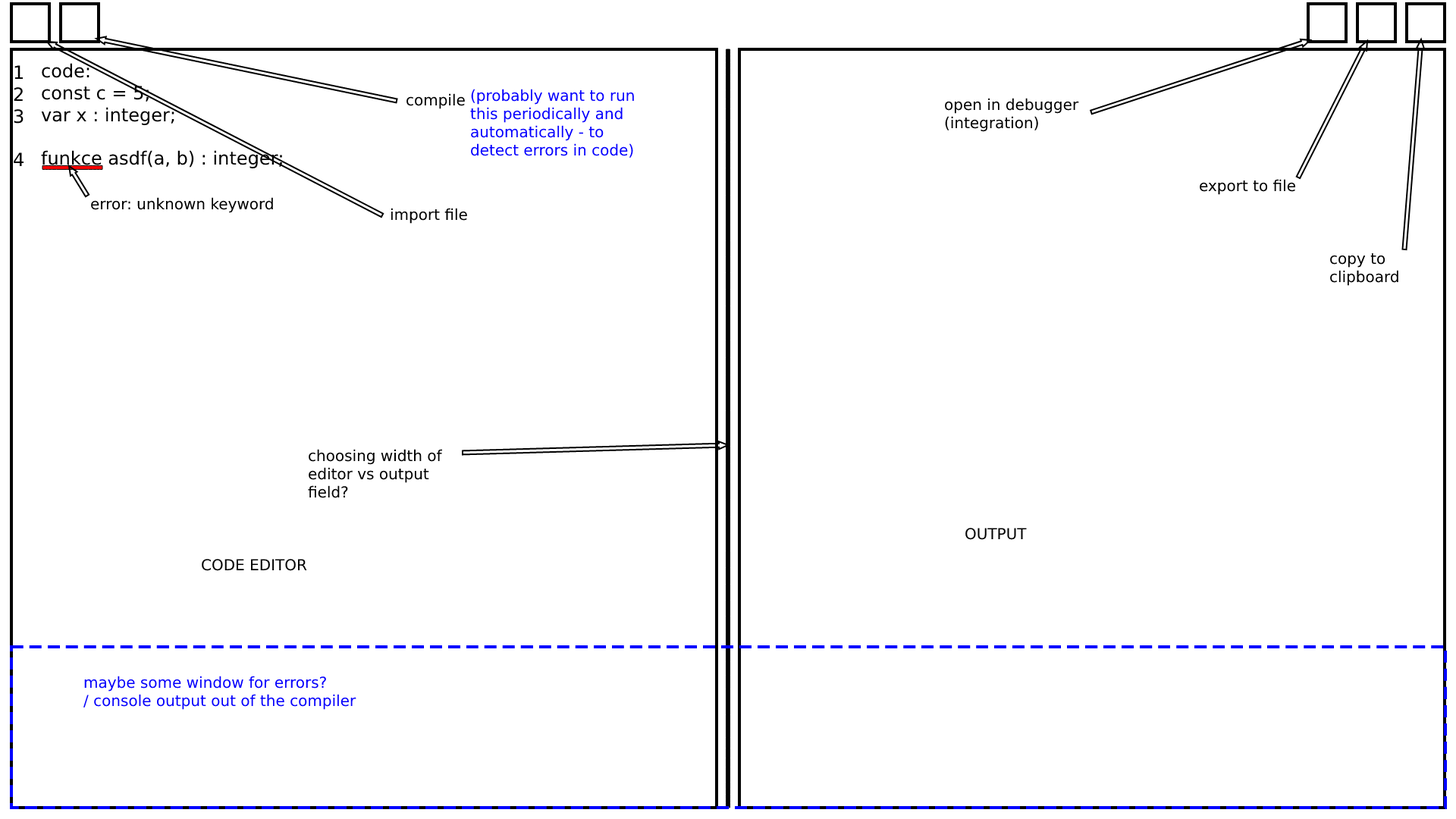
<style>
.page{position:relative;width:1456px;height:819px;background:#ffffff}
.page>*{position:absolute;margin:0}
.t1{font:18.2px "DejaVuSans";color:#000000}
.t2{font:15.2px "DejaVuSans";color:#0600ff}
.t3{font:15.2px "DejaVuSans";color:#000000}
.t4{font:15.2px "DejaVuSans";color:#0600fd}
</style>
<div class="page">
<p class="t1" style="left:14px;top:65px;width:10px;height:101px">1<br>2<br>3<br><br>4</p>
<p class="t1" style="left:41px;top:63px;width:241px;height:105px">code:<br>const c = 5;<br>var x : integer;<br><br>funkce asdf(a, b) : integer;</p>
<p class="t2" style="left:470px;top:89px;width:164px;height:69px">(probably want to run this periodically and automatically - to detect errors in code)</p>
<p class="t3" style="left:406px;top:93px;width:59px;height:16px">compile</p>
<p class="t3" style="left:945px;top:98px;width:134px;height:34px">open in debugger (integration)</p>
<p class="t3" style="left:1200px;top:179px;width:95px;height:16px">export to file</p>
<p class="t3" style="left:91px;top:197px;width:182px;height:16px">error: unknown keyword</p>
<p class="t3" style="left:391px;top:208px;width:76px;height:16px">import file</p>
<p class="t3" style="left:1330px;top:253px;width:68px;height:33px">copy to clipboard</p>
<p class="t3" style="left:308px;top:449px;width:134px;height:49px">choosing width of editor vs output field?</p>
<p class="t3" style="left:965px;top:528px;width:62px;height:12px">OUTPUT</p>
<p class="t3" style="left:202px;top:559px;width:105px;height:12px">CODE EDITOR</p>
<p class="t4" style="left:83px;top:676px;width:273px;height:34px">maybe some window for errors?<br>/ console output out of the compiler</p>
</div>
